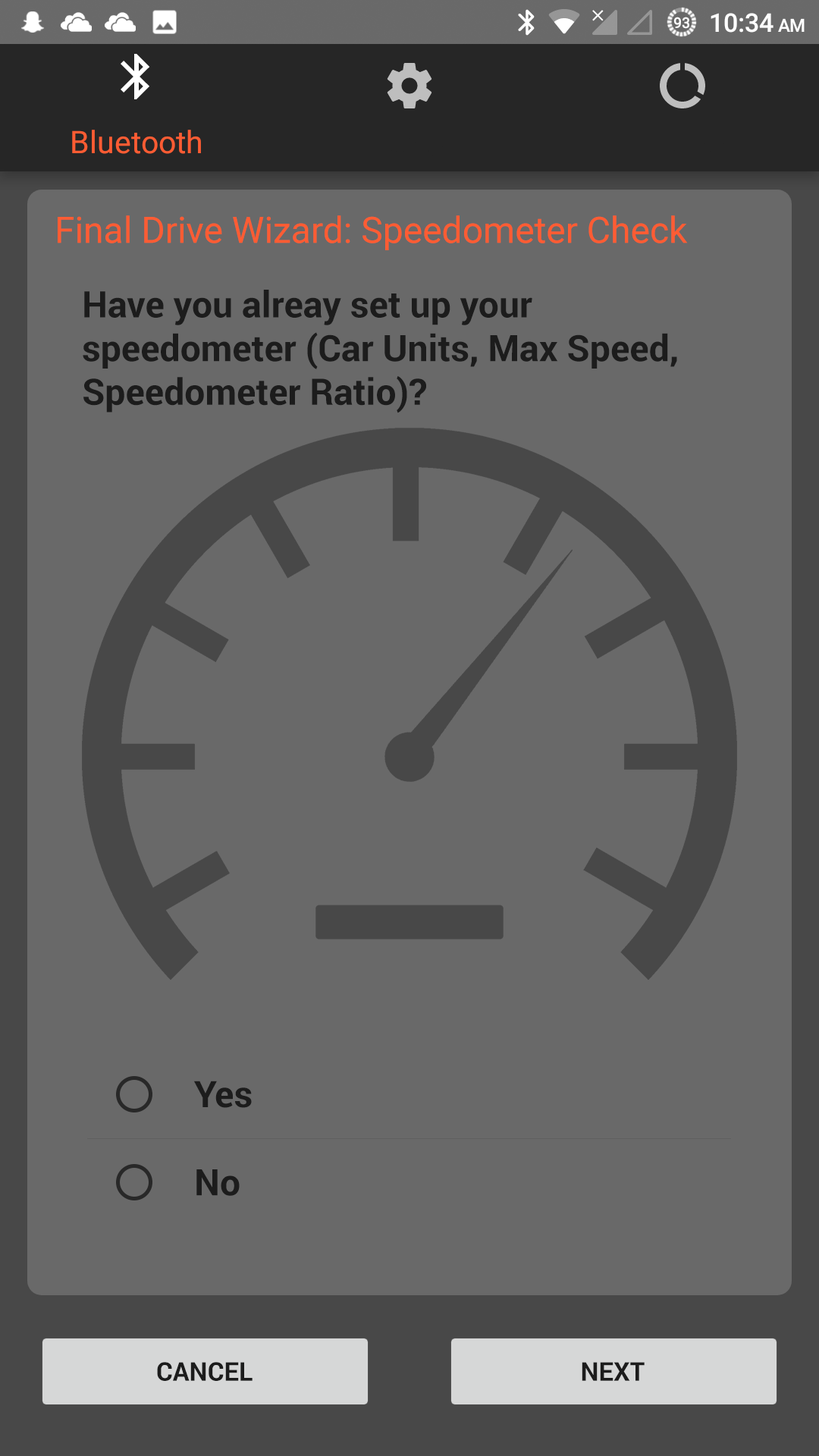
<style>
.page{position:relative;width:819px;height:1456px;background:#696969}
.page>*{position:absolute;margin:0}
.t1{font:36.4px "Roboto-Regular";color:#ff5c33}
.t2{font:36.4px "Roboto-Bold";color:#1c1c1c}
.t3{font:25.8px "Roboto-Bold";color:#1c1c1c}
</style>
<div class="page">
<p class="t1" style="left:58px;top:215px;width:630px;height:35px">Final Drive Wizard: Speedometer Check</p>
<p class="t2" style="left:83px;top:290px;width:594px;height:123px">Have you alreay set up your<br>speedometer (Car Units, Max Speed,<br>Speedometer Ratio)?</p>
<p class="t2" style="left:193px;top:1081px;width:59px;height:27px">Yes</p>
<p class="t2" style="left:196px;top:1169px;width:44px;height:27px">No</p>
<p class="t3" style="left:157px;top:1362px;width:96px;height:19px">CANCEL</p>
<p class="t3" style="left:582px;top:1362px;width:63px;height:19px">NEXT</p>
</div>
